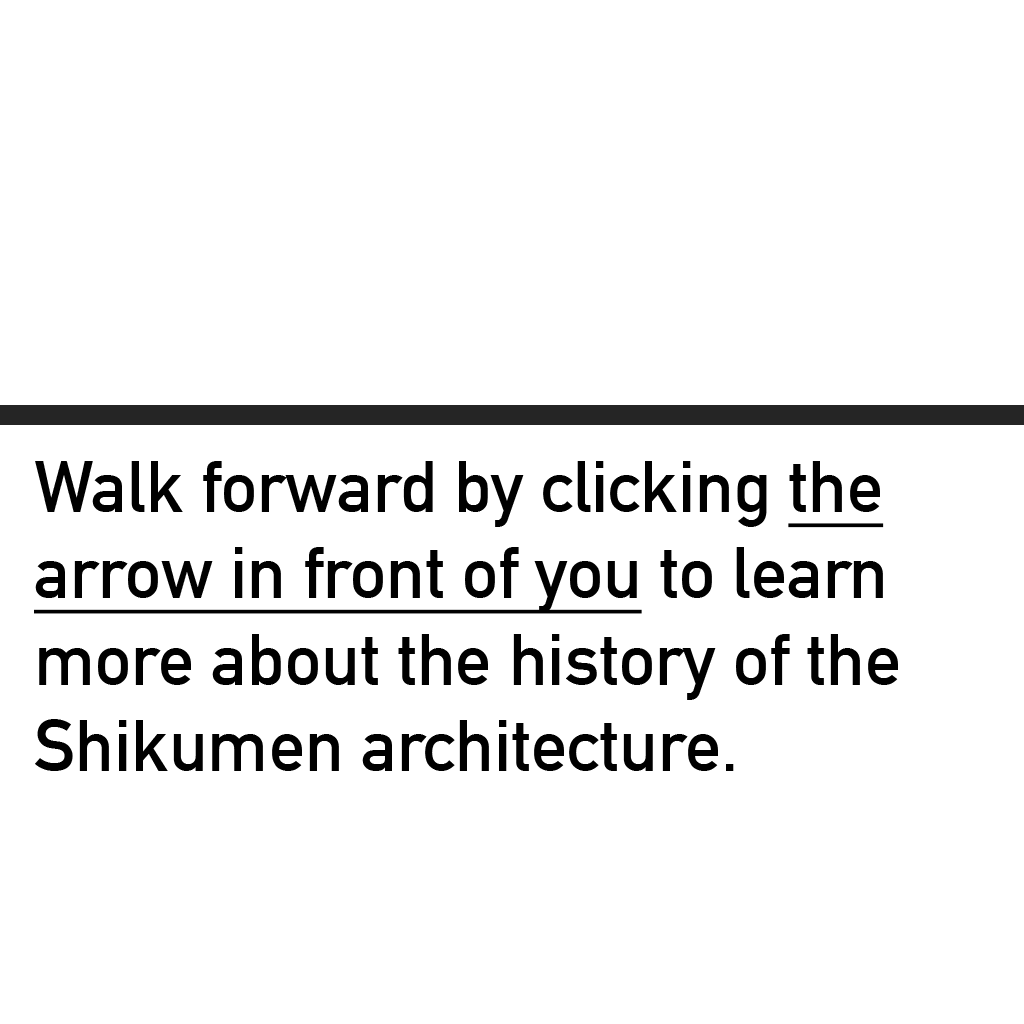
<style>
.page{position:relative;width:1024px;height:1024px;background:#ffffff}
.page>*{position:absolute;margin:0}
.t1{font:72px "DINAlternate-Bold";color:#000000}
.t2{font:72px "DINAlternate-Bold";color:#000000;text-decoration:underline}
</style>
<div class="page">
<p class="t1" style="left:34px;top:461px;width:864px;height:310px">Walk forward by clicking <span class="t2">the<br>arrow in front of you</span> to learn<br>more about the history of the <br>Shikumen architecture.</p>
</div>
